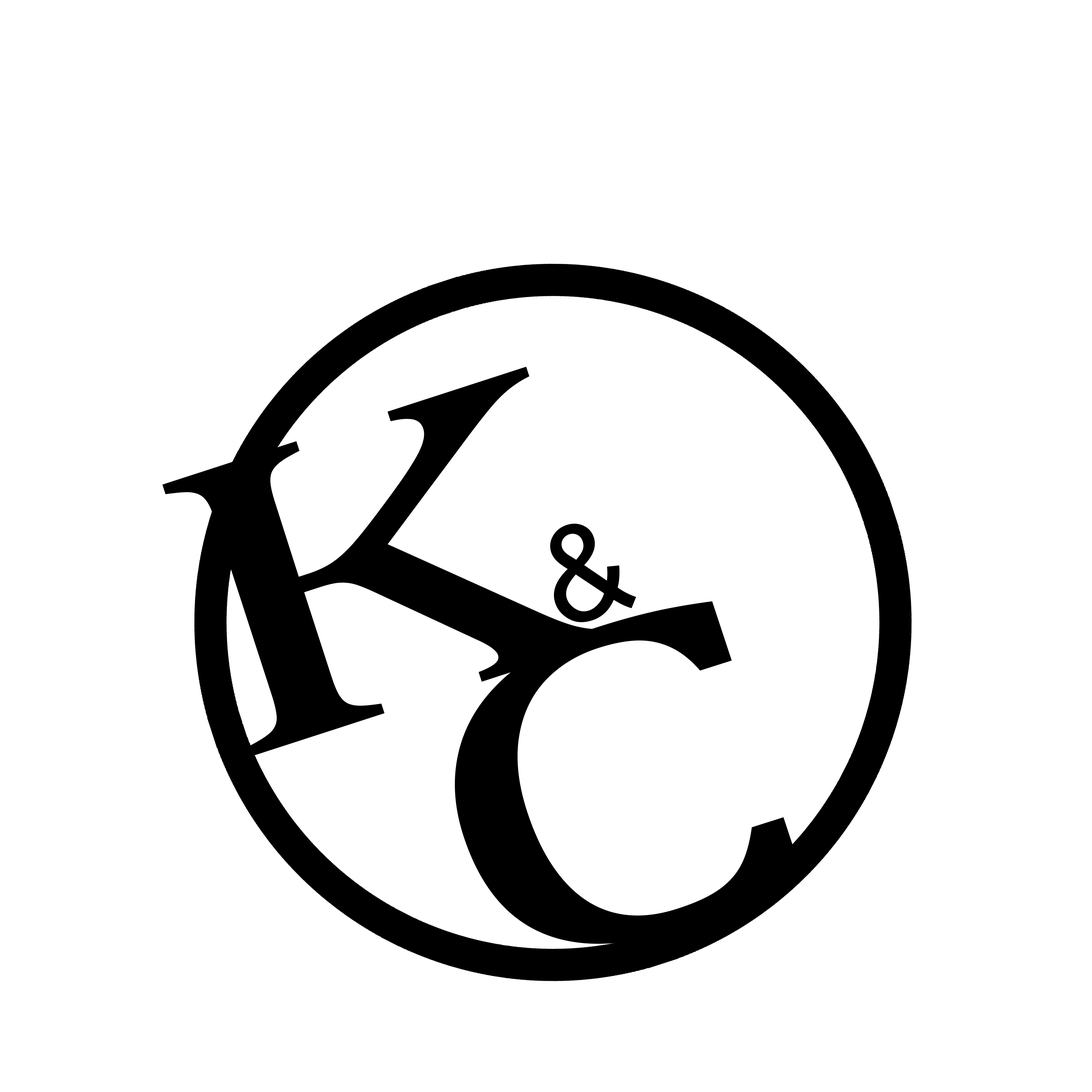
<style>
.page{position:relative;width:1092px;height:1092px;background:#ffffff}
.page>*{position:absolute;margin:0}
.t1{font:103.1px "Cambria";color:#000000;scale:1.59 1}
.t2{font:133.2px "ArialNarrow";color:#000000;scale:1.2 1}
.t3{font:457.7px "Cambria";color:#000000;scale:1.5 1}
</style>
<div class="page">
<p class="t1" style="left:162px;top:367px;width:460px;height:390px;rotate:-18deg">K</p>
<p class="t2" style="left:550px;top:523px;width:86px;height:99px;rotate:-18deg">&amp;</p>
<p class="t3" style="left:455px;top:601px;width:349px;height:343px;rotate:-18deg">C</p>
</div>
